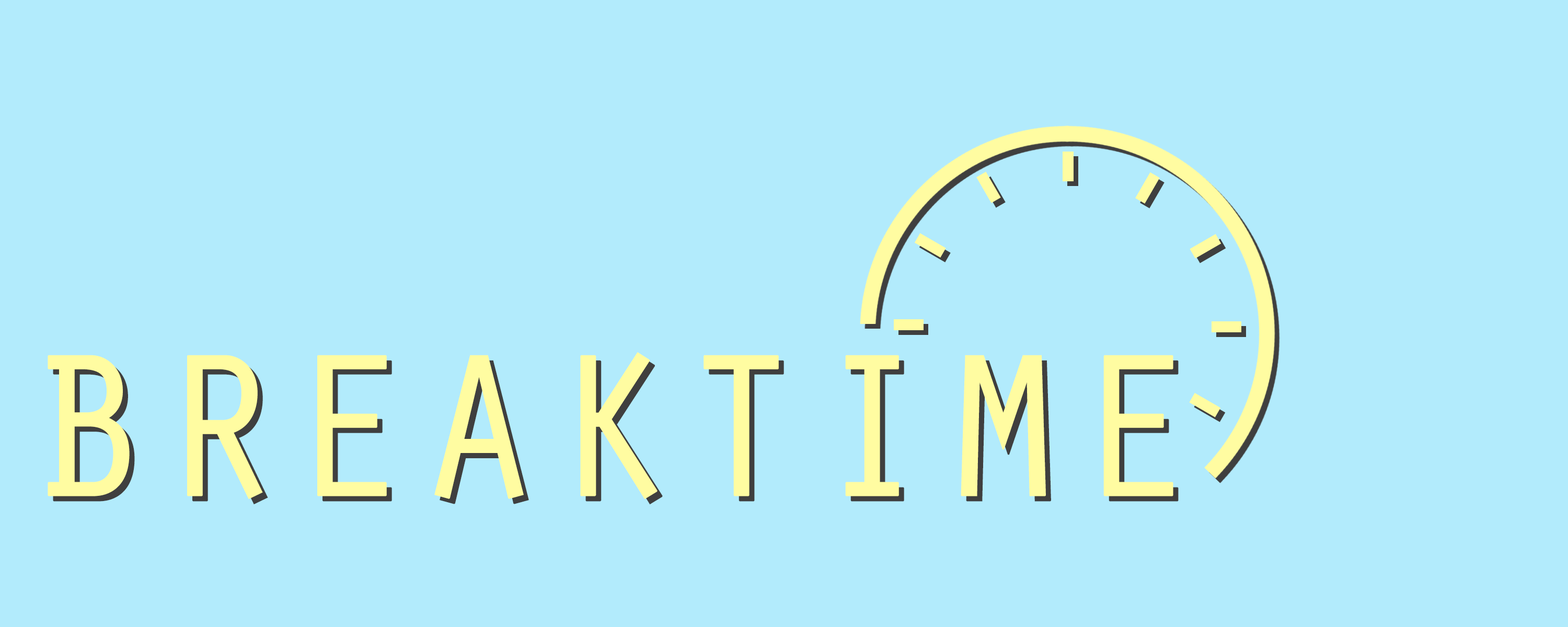
<style>
.page{position:relative;width:1568px;height:627px;background:#b2ebfc}
.page>*{position:absolute;margin:0}
.t1{font:209.1px "OratorStd";color:#fffca1;font-weight:bold}
.t2{font:209.1px "OratorStd";font-weight:bold}
</style>
<div class="page">
<p class="t1" style="left:48px;top:352px;width:1125px;height:148px">BREAKTIME</p>
<p class="t2" style="left:53px;top:358px;width:1126px;height:147px">BREAKTIME</p>
</div>
